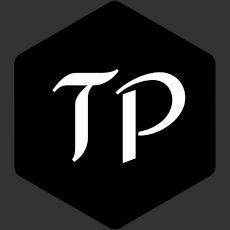
<style>
.page{position:relative;width:230px;height:230px;background:#000000}
.page>*{position:absolute;margin:0}
.t1{font:125px "Redressed";color:#ffffff}
</style>
<div class="page">
<p class="t1" style="left:52px;top:69px;width:134px;height:94px">TP</p>
</div>
